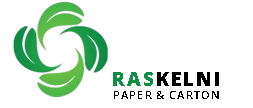
<style>
.page{position:relative;width:253px;height:108px;background:#ffffff}
.page>*{position:absolute;margin:0}
.t1{font:18.7px "OpenSans-ExtraBold";letter-spacing:0.1em;color:#000000;text-transform:uppercase}
.t2{font:18.7px "OpenSans-ExtraBold";letter-spacing:0.1em;color:#0e8f43;text-transform:uppercase}
.t3{font:10.7px "OpenSans-SemiBold";letter-spacing:0.1em;color:#000000;text-transform:uppercase}
</style>
<div class="page">
<p class="t1" style="left:113px;top:72px;width:106px;height:14px"><span class="t2">ras</span>kelni</p>
<p class="t3" style="left:114px;top:91px;width:105px;height:8px">paper &amp; carton</p>
</div>
